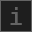
<style>
.page{position:relative;width:32px;height:32px;background:#1e1e1e}
.page>*{position:absolute;margin:0}
.t1{font:24px "DejaVuSansMono";color:#636363}
</style>
<div class="page">
<p class="t1" style="left:10px;top:7px;width:12px;height:18px">i</p>
</div>
